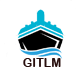
<style>
.page{position:relative;width:82px;height:76px;background:#ffffff}
.page>*{position:absolute;margin:0}
.t1{font:12.3px "ArialRoundedMTBold";color:#280e0d}
</style>
<div class="page">
<p class="t1" style="left:23px;top:58px;width:38px;height:9px">GITLM</p>
</div>
